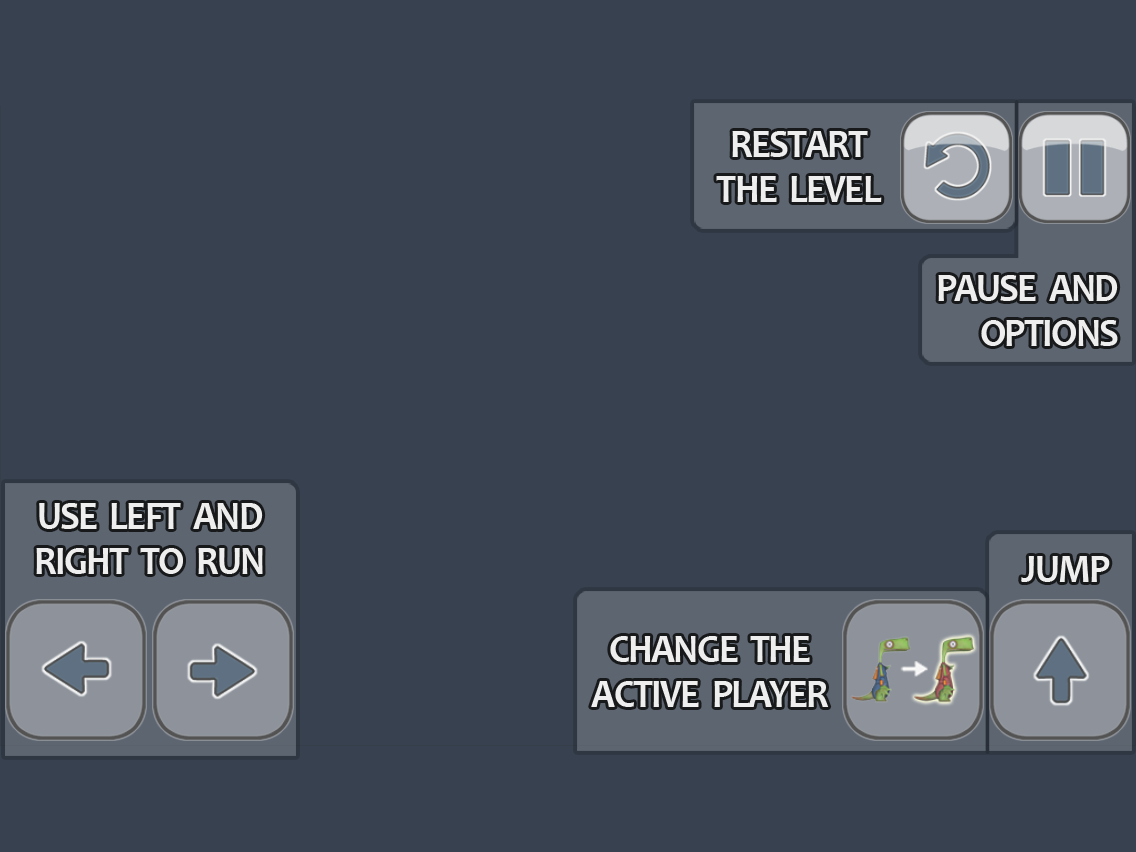
<style>
.page{position:relative;width:1136px;height:852px;background:#374150}
.page>*{position:absolute;margin:0}
.t1{font:39.8px "Candara-Bold";letter-spacing:-0.04em;color:#eeeeee;scale:0.94 1}
</style>
<div class="page">
<p class="t1" style="left:716px;top:131px;width:166px;height:71px;text-align:center">RESTART<br>THE  LEVEL</p>
<p class="t1" style="left:938px;top:275px;width:180px;height:71px;text-align:right">PAUSE  AND OPTIONS</p>
<p class="t1" style="left:36px;top:503px;width:227px;height:71px;text-align:center">USE  LEFT  AND  <br>RIGHT  TO  RUN</p>
<p class="t1" style="left:1021px;top:556px;width:89px;height:26px">JUMP</p>
<p class="t1" style="left:591px;top:636px;width:238px;height:71px;text-align:center">CHANGE  THE <br>ACTIVE  PLAYER</p>
</div>
